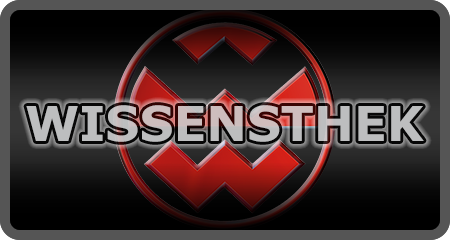
<style>
.page{position:relative;width:450px;height:240px}
.page>*{position:absolute;margin:0}
.t1{font:48px "MSReferenceSansSerif-Bold";color:#cfd0d1}
</style>
<div class="page">
<p class="t1" style="left:26px;top:105px;width:398px;height:37px;opacity:0.85">WISSENSTHEK</p>
</div>
